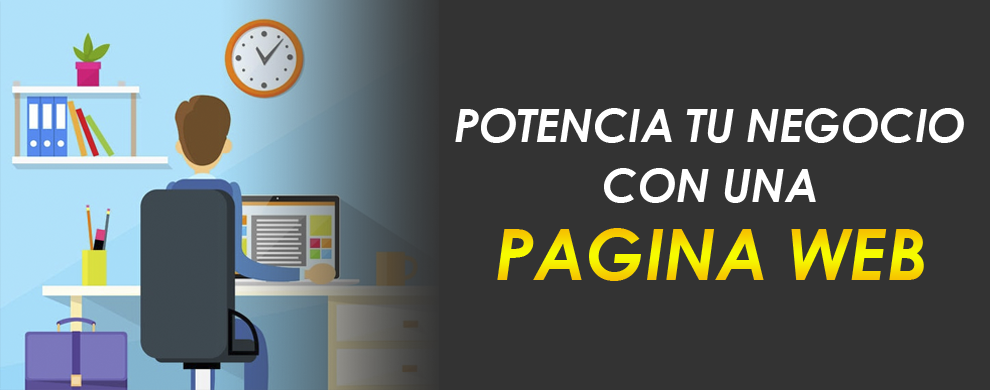
<style>
.page{position:relative;width:990px;height:390px;background:#333333}
.page>*{position:absolute;margin:0}
.t1{font:45.9px "CenturyGothic-BoldItalic";letter-spacing:-0.01em;color:#ffffff}
.t2{font:70.9px "CenturyGothic-BoldItalic";letter-spacing:-0.01em}
</style>
<div class="page">
<p class="t1" style="left:455px;top:108px;width:509px;height:35px">POTENCIA TU NEGOCIO</p>
<p class="t1" style="left:604px;top:168px;width:212px;height:35px">CON UNA</p>
<p class="t2" style="left:497px;top:228px;width:427px;height:53px">PAGINA WEB</p>
</div>
